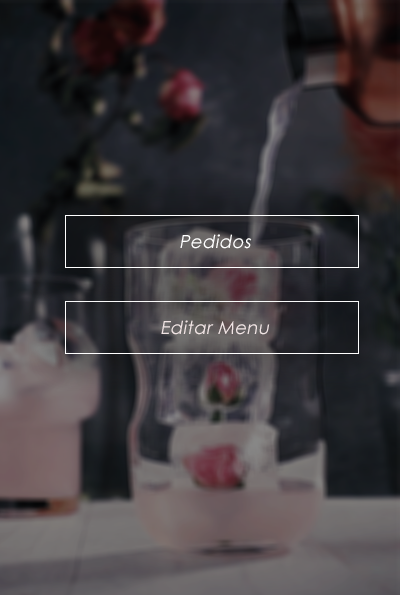
<style>
.page{position:relative;width:400px;height:595px}
.page>*{position:absolute;margin:0}
.t1{font:18px "CenturyGothic";letter-spacing:0.025em;color:#ffffff;font-style:italic}
.t2{font:18px "CenturyGothic";letter-spacing:0.025em;color:#f0e4e4;font-style:italic}
</style>
<div class="page">
<p class="t1" style="left:180px;top:234px;width:72px;height:15px">Pedidos</p>
<p class="t2" style="left:161px;top:320px;width:109px;height:15px">Editar Menu</p>
</div>
